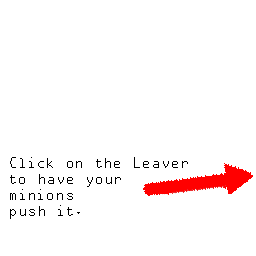
<style>
.page{position:relative;width:256px;height:256px;background:#ffffff}
.page>*{position:absolute;margin:0}
.t1{font:13.3px "OCRAStd";color:#000000}
</style>
<div class="page">
<p class="t1" style="left:10px;top:157px;width:178px;height:62px">Click on the Leaver<br>to have your<br>minions <br>push it.</p>
</div>
